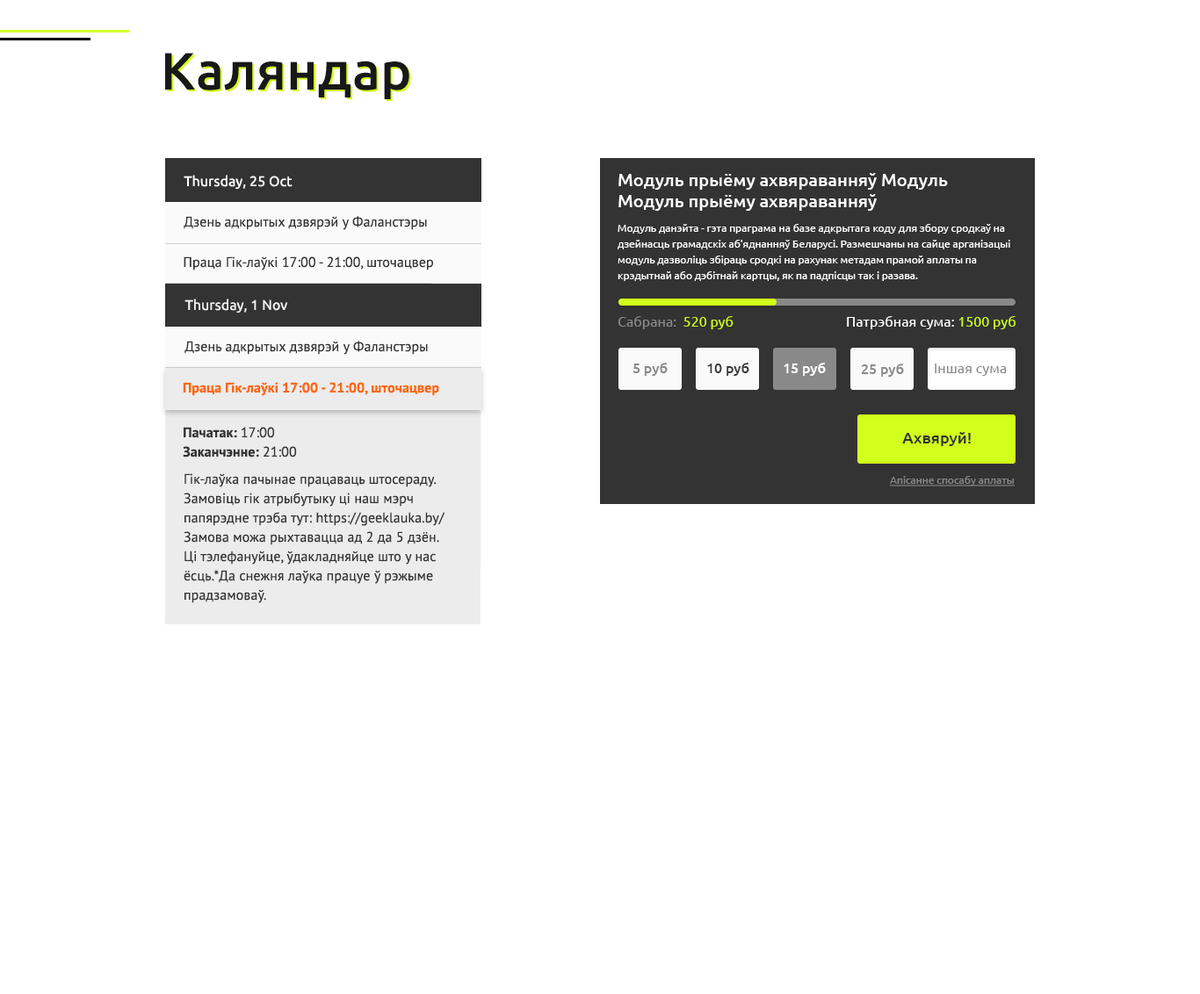
<style>
.page{position:relative;width:1200px;height:994px;background:#ffffff}
.page>*{position:absolute;margin:0}
.t1{font:52.7px "Ubuntu-Medium";letter-spacing:0.005em;color:#181818}
.t2{font:52.7px "Ubuntu-Medium";letter-spacing:0.005em}
.t3{font:17.6px/21.1px "Ubuntu-Medium";color:#ffffff}
.t4{font:14.1px "Ubuntu-Regular";letter-spacing:0.005em;color:#ffffff}
.t5{font:14.1px "PTSans-Regular";letter-spacing:0.005em;color:#333333}
.t6{font:10.5px/15.8px "Ubuntu-Regular";color:#ffffff}
.t7{font:14.1px "Ubuntu-Regular";letter-spacing:0.005em;color:#f2f2f2}
.t8{font:14.1px "Ubuntu-Regular";color:#898989}
.t9{font:14.1px "Ubuntu-Regular";color:#d2ff1b}
.t10{font:14.1px "Ubuntu-Regular";color:#ffffff}
.t11{font:14.1px "Ubuntu-Medium";color:#898989}
.t12{font:14.1px "Ubuntu-Medium";color:#3a3a39}
.t13{font:14.1px "Ubuntu-Medium";color:#ffffff}
.t14{font:14.1px "PTSans-Bold";letter-spacing:0.005em;color:#ff6600}
.t15{font:14.1px/19.3px "PTSans-Bold";letter-spacing:0.005em;color:#333333}
.t16{font:14.1px/19.3px "PTSans-Regular";letter-spacing:0.005em;color:#333333}
.t17{font:15.8px "Ubuntu-Medium";color:#333333}
.t18{font:10.5px "Ubuntu-Regular";color:#898989;text-decoration:underline}
</style>
<div class="page">
<p class="t1" style="left:165px;top:53px;width:244px;height:46px">Каляндар</p>
<p class="t2" style="left:167px;top:54px;width:244px;height:47px">Каляндар</p>
<p class="t3" style="left:618px;top:173px;width:330px;height:38px">Модуль прыёму ахвяраванняў Модуль <br>Модуль прыёму ахвяраванняў</p>
<p class="t4" style="left:184px;top:175px;width:108px;height:15px">Thursday, 25 Oct</p>
<p class="t5" style="left:184px;top:216px;width:243px;height:14px">Дзень адкрытых дзвярэй у Фаланстэры</p>
<p class="t6" style="left:617px;top:224px;width:393px;height:57px">Модуль данэйта - гэта праграма на базе адкрытага коду для збору сродкаў на <br>дзейнасць грамадскіх аб'яднанняў Беларусі. Размешчаны на сайце арганізацыі <br>модуль дазволіць збіраць сродкі на рахунак метадам прамой аплаты па <br>крэдытнай або дэбітнай картцы, як па падпісцы так і разава.</p>
<p class="t5" style="left:184px;top:256px;width:249px;height:14px">Праца Гік-лаўкі 17:00 - 21:00, шточацвер</p>
<p class="t7" style="left:184px;top:299px;width:104px;height:14px">Thursday, 1 Nov</p>
<p class="t8" style="left:617px;top:316px;width:116px;height:13px">Сабрана:  <span class="t9">520 руб</span></p>
<p class="t10" style="left:847px;top:316px;width:168px;height:13px">Патрэбная сума: <span class="t9">1500 руб</span></p>
<p class="t5" style="left:184px;top:341px;width:244px;height:14px">Дзень адкрытых дзвярэй у Фаланстэры</p>
<p class="t11" style="left:632px;top:363px;width:35px;height:13px">5 руб</p>
<p class="t12" style="left:707px;top:363px;width:42px;height:13px">10 руб</p>
<p class="t13" style="left:783px;top:363px;width:42px;height:13px">15 руб</p>
<p class="t11" style="left:861px;top:364px;width:43px;height:13px">25 руб</p>
<p class="t8" style="left:934px;top:364px;width:72px;height:12px">Iншая сума</p>
<p class="t14" style="left:183px;top:382px;width:256px;height:14px">Праца Гік-лаўкі 17:00 - 21:00, шточацвер</p>
<p class="t15" style="left:183px;top:427px;width:114px;height:31px">Пачатак: <span class="t16">17:00<br></span>Заканчэнне: <span class="t16">21:00</span></p>
<p class="t17" style="left:902px;top:432px;width:68px;height:14px">Ахвяруй!</p>
<p class="t16" style="left:184px;top:473px;width:261px;height:130px">Гік-лаўка пачынае працаваць штосераду.<br>Замовіць гік атрыбутыку ці наш мэрч <br>папярэдне трэба тут: https://geeklauka.by/<br>Замова можа рыхтавацца ад 2 да 5 дзён. <br>Ці тэлефануйце, ўдакладняйце што у нас <br>ёсць.*Да снежня лаўка працуе ў рэжыме <br>прадзамоваў.</p>
<p class="t18" style="left:890px;top:476px;width:124px;height:10px">Апiсанне спосабу аплаты</p>
</div>
